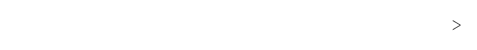
<style>
.page{position:relative;width:477px;height:50px;background:#ffffff}
.page>*{position:absolute;margin:0}
.t1{font:28.8px "BodoniMTPosterCompressed";color:#4a4a4a;scale:0.74 1}
</style>
<div class="page">
<p class="t1" style="left:452px;top:20px;width:9px;height:11px">&gt;</p>
</div>
